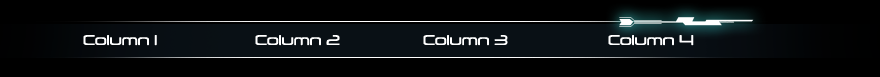
<style>
.page{position:relative;width:880px;height:77px;background:#000000}
.page>*{position:absolute;margin:0}
.t1{font:13.6px "Neuropol-Regular";color:#ffffff}
</style>
<div class="page">
<p class="t1" style="left:83px;top:35px;width:74px;height:11px">Column 1</p>
<p class="t1" style="left:255px;top:35px;width:85px;height:11px">Column 2</p>
<p class="t1" style="left:423px;top:35px;width:85px;height:11px">Column 3</p>
<p class="t1" style="left:608px;top:35px;width:86px;height:11px">Column 4</p>
</div>
